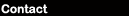
<style>
.page{position:relative;width:129px;height:16px;background:#020100}
.page>*{position:absolute;margin:0}
.t1{font:12px "ArialRoundedMTBold";color:#ffffff}
</style>
<div class="page">
<p class="t1" style="left:1px;top:4px;width:47px;height:10px">Contact</p>
</div>
